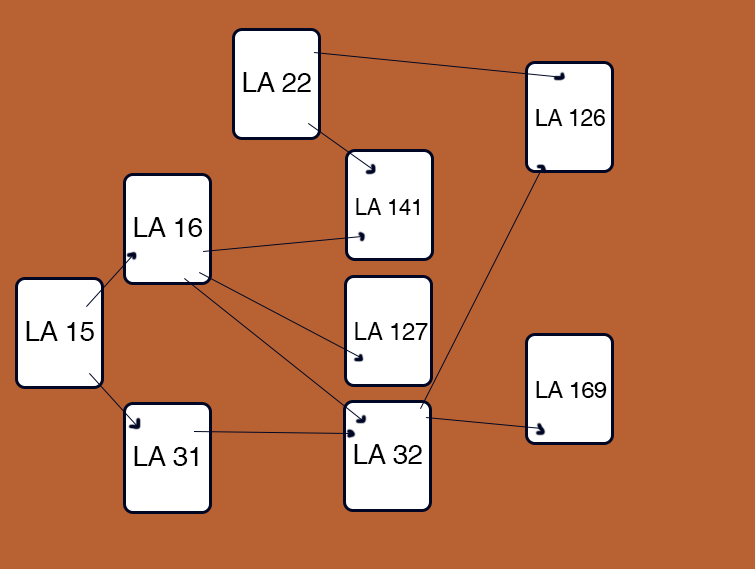
<style>
.page{position:relative;width:755px;height:569px;background:#b86233}
.page>*{position:absolute;margin:0}
.t1{font:28.5px "Helvetica";letter-spacing:-0.02em;color:#000000}
.t2{font:23.9px "Helvetica";letter-spacing:-0.02em;color:#000000}
.t3{font:23.1px "Helvetica";letter-spacing:-0.02em;color:#000000}
.t4{font:25.1px "Helvetica";letter-spacing:-0.02em;color:#000000}
.t5{font:24.2px "Helvetica";letter-spacing:-0.02em;color:#000000}
</style>
<div class="page">
<p class="t1" style="left:243px;top:72px;width:68px;height:20px">LA 22</p>
<p class="t2" style="left:536px;top:109px;width:69px;height:17px">LA 126</p>
<p class="t3" style="left:356px;top:198px;width:63px;height:17px">LA 141</p>
<p class="t1" style="left:134px;top:217px;width:68px;height:20px">LA 16</p>
<p class="t1" style="left:26px;top:321px;width:68px;height:20px">LA 15</p>
<p class="t4" style="left:355px;top:322px;width:73px;height:18px">LA 127</p>
<p class="t5" style="left:536px;top:381px;width:71px;height:17px">LA 169</p>
<p class="t1" style="left:134px;top:446px;width:64px;height:20px">LA 31</p>
<p class="t1" style="left:354px;top:444px;width:68px;height:20px">LA 32</p>
</div>
